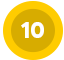
<style>
.page{position:relative;width:64px;height:60px;background:#d7ac00}
.page>*{position:absolute;margin:0}
.t1{font:22px "MADETOMMY-Bold";color:#ffffff}
</style>
<div class="page">
<p class="t1" style="left:21px;top:22px;width:23px;height:16px">10</p>
</div>
